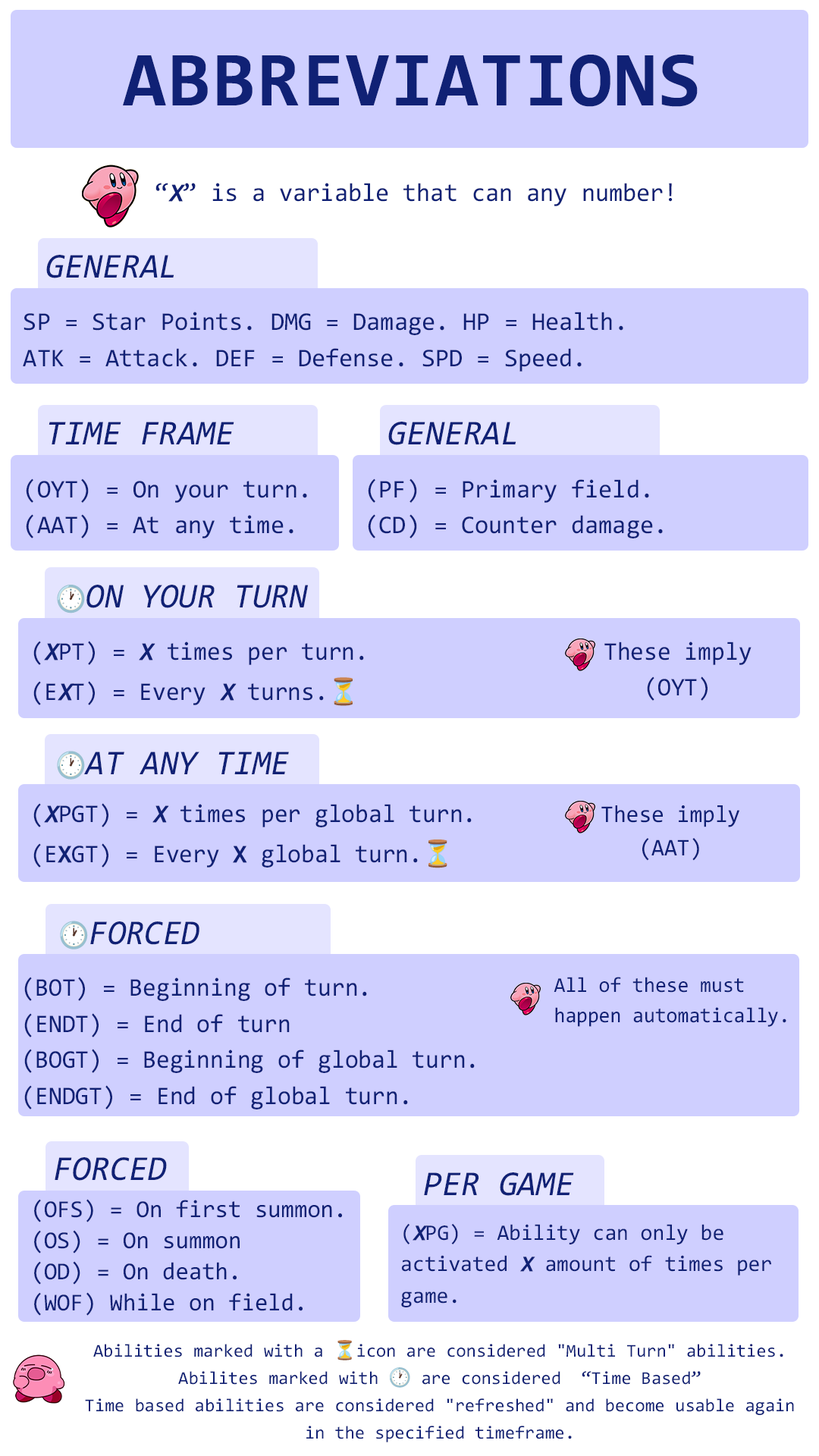
<style>
.page{position:relative;width:819px;height:1456px;background:#cfcfff}
.page>*{position:absolute;margin:0}
.t1{font:78.3px "Consolas-Bold";letter-spacing:0.02em;color:#102175;text-transform:uppercase}
.t2{font:25.5px "Consolas";color:#102175}
.t3{font:25.5px "Consolas";color:#102175;font-weight:bold;font-style:italic}
.t4{font:35px "Consolas-Italic";color:#102175}
.t5{font:35px "Consolas-Italic";color:#102175;scale:0.96 1}
.t6{font:25.5px "NotoColorEmoji-SVG";color:#102175;scale:0.96 1}
.t7{font:25.5px/40.4px "Consolas";color:#102175;scale:0.96 1}
.t8{font:25.5px/40.4px "Consolas";color:#102175;font-weight:bold;font-style:italic;scale:0.96 1}
.t9{font:25.5px/40.4px "NotoColorEmoji-SVG";color:#102175;scale:0.96 1}
.t10{font:25.5px "Consolas";color:#102175;scale:0.96 1}
.t11{font:25.5px/40.4px "Consolas";color:#102175;font-weight:bold;scale:0.96 1}
.t12{font:24.1px "Consolas";color:#102175;scale:0.96 1}
.t13{font:35px "Consolas-Italic";scale:0.96 1}
.t14{font:25.5px "NotoColorEmoji-SVG";scale:0.96 1}
.t15{font:21.3px "Consolas";color:#102175;scale:0.96 1}
.t16{font:24.5px/31.1px "Consolas";color:#102175}
.t17{font:22.2px "Consolas";color:#102175}
.t18{font:22.2px "Consolas";color:#102175;font-weight:bold;font-style:italic}
.t19{font:18.2px/27.3px "Consolas";color:#102175}
.t20{font:18.2px/27.3px "NotoColorEmoji-SVG";color:#102175}
</style>
<div class="page">
<p class="t1" style="left:123px;top:55px;width:575px;height:52px">Abbreviations</p>
<p class="t2" style="left:155px;top:183px;width:518px;height:23px">“<span class="t3">X</span>” is a variable that can any number!</p>
<p class="t4" style="left:46px;top:255px;width:128px;height:23px">GENERAL</p>
<p class="t2" style="left:23px;top:312px;width:600px;height:60px">SP = Star Points. DMG = Damage. HP = Health.<br>ATK = Attack. DEF = Defense. SPD = Speed.</p>
<p class="t4" style="left:49px;top:422px;width:185px;height:22px">TIME FRAME</p>
<p class="t4" style="left:388px;top:422px;width:128px;height:23px">GENERAL</p>
<p class="t2" style="left:26px;top:479px;width:281px;height:59px">(OYT) = On your turn.<br>(AAT) = At any time.</p>
<p class="t2" style="left:368px;top:479px;width:295px;height:59px">(PF) = Primary field.<br>(CD) = Counter damage.</p>
<p class="t5" style="left:57px;top:585px;width:251px;height:28px"><span class="t6">🕐</span>ON YOUR TURN</p>
<p class="t7" style="left:33px;top:641px;width:331px;height:65px">(<span class="t8">X</span>PT) = <span class="t8">X</span> times per turn.<br>(E<span class="t8">X</span>T) = Every <span class="t8">X</span> turns.<span class="t9">⏳</span></p>
<p class="t10" style="left:604px;top:642px;width:147px;height:59px;text-align:center">These imply<br> (OYT)</p>
<p class="t5" style="left:57px;top:751px;width:232px;height:29px"><span class="t6">🕐</span>AT ANY TIME</p>
<p class="t7" style="left:33px;top:803px;width:439px;height:65px">(<span class="t8">X</span>PGT) = <span class="t8">X</span> times per global turn.<br>(E<span class="t11">X</span>GT) = Every <span class="t11">X</span> global turn.<span class="t9">⏳</span></p>
<p class="t12" style="left:601px;top:805px;width:138px;height:56px;text-align:center">These imply<br>(AAT)</p>
<p class="t13" style="left:60px;top:921px;width:139px;height:28px"><span class="t14">🕐</span>FORCED</p>
<p class="t10" style="left:24px;top:977px;width:451px;height:132px">(BOT) = Beginning of turn.<br>(ENDT) = End of turn<br>(BOGT) = Beginning of global turn.<br>(ENDGT) = End of global turn.</p>
<p class="t15" style="left:554px;top:977px;width:232px;height:50px">All of these must happen automatically.</p>
<p class="t4" style="left:55px;top:1157px;width:112px;height:24px">FORCED</p>
<p class="t4" style="left:424px;top:1172px;width:150px;height:24px">PER GAME</p>
<p class="t16" style="left:34px;top:1199px;width:308px;height:117px">(OFS) = On first summon.<br>(OS) = On summon<br>(OD) = On death.<br>(WOF) While on field.</p>
<p class="t17" style="left:401px;top:1223px;width:370px;height:84px">(<span class="t18">X</span>PG) = Ability can only be activated <span class="t18">X</span> amount of times per game.</p>
<p class="t19" style="left:85px;top:1340px;width:709px;height:102px;text-align:center">Abilities marked with a <span class="t20">⏳</span>icon are considered "Multi Turn" abilities.<br>Abilites marked with <span class="t20">🕐</span> are considered  “Time Based”<br>Time based abilities are considered "refreshed" and become usable again in the specified timeframe.</p>
</div>
